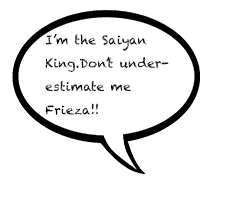
<style>
.page{position:relative;width:225px;height:200px;background:#ffffff}
.page>*{position:absolute;margin:0}
.t1{font:12.4px/23.3px "Chalkduster";color:#050505}
</style>
<div class="page">
<p class="t1" style="left:45px;top:33px;width:124px;height:82px">I’m the Saiyan King.Don’t underestimate me Frieza!!</p>
</div>
